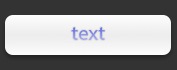
<style>
.page{position:relative;width:177px;height:70px;background:#333333}
.page>*{position:absolute;margin:0}
.t1{font:12px "MyriadPro-Regular";color:#828be4}
</style>
<div class="page">
<p class="t1" style="left:71px;top:27px;width:34px;height:13px">text</p>
</div>
